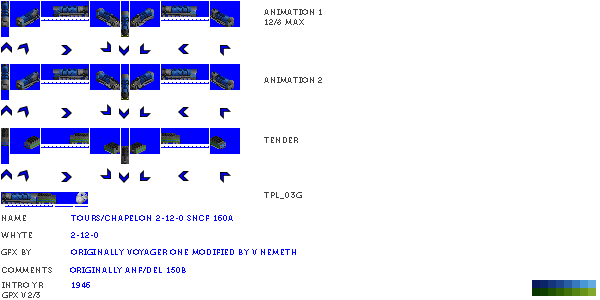
<style>
.page{position:relative;width:600px;height:300px;background:#ffffff}
.page>*{position:absolute;margin:0}
.t1{font:8px "Museo700-Regular";letter-spacing:0.075em;color:#404040;text-transform:uppercase}
.t2{font:8px "Museo700-Regular";letter-spacing:0.075em;color:#0000ff;text-transform:uppercase}
</style>
<div class="page">
<p class="t1" style="left:264px;top:9px;width:58px;height:16px">Animation 1<br>12/8 max</p>
<p class="t1" style="left:264px;top:77px;width:58px;height:6px">Animation 2</p>
<p class="t1" style="left:264px;top:137px;width:34px;height:6px">tender</p>
<p class="t1" style="left:264px;top:192px;width:38px;height:7px">tpl_03g</p>
<p class="t1" style="left:2px;top:215px;width:24px;height:6px">name</p>
<p class="t2" style="left:71px;top:215px;width:162px;height:6px">Tours/Chapelon 2-12-0 SNCF 160A</p>
<p class="t1" style="left:1px;top:232px;width:31px;height:6px">whyte</p>
<p class="t2" style="left:71px;top:232px;width:27px;height:6px">2-12-0</p>
<p class="t1" style="left:1px;top:249px;width:30px;height:6px">gfx by</p>
<p class="t2" style="left:71px;top:249px;width:225px;height:6px">originally voyager one modified by v nemeth</p>
<p class="t1" style="left:2px;top:267px;width:50px;height:6px">comments</p>
<p class="t2" style="left:70px;top:267px;width:116px;height:6px">originally ANF/DEL 150B</p>
<p class="t1" style="left:2px;top:292px;width:38px;height:6px">gpx v2/3</p>
<p class="t1" style="left:2px;top:282px;width:41px;height:6px">intro yr</p>
<p class="t2" style="left:72px;top:282px;width:18px;height:6px">1946</p>
</div>
